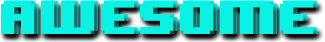
<style>
.page{position:relative;width:325px;height:42px;background:#09f2e4}
.page>*{position:absolute;margin:0}
.t1{font:40px "8BITWONDERNominal";color:#09f2e4}
</style>
<div class="page">
<p class="t1" style="left:1px;top:0px;width:313px;height:34px">awesome</p>
<p class="t1" style="left:1px;top:0px;width:313px;height:34px">awesome</p>
<p class="t1" style="left:5px;top:0px;width:313px;height:34px">awesome</p>
</div>
